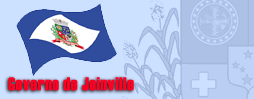
<style>
.page{position:relative;width:254px;height:99px;background:#cce0ff}
.page>*{position:absolute;margin:0}
.t1{font:18px "Haettenschweiler";letter-spacing:0.02em;color:#ff0022;font-weight:bold}
</style>
<div class="page">
<p class="t1" style="left:8px;top:77px;width:126px;height:14px">Governo de Joinville</p>
</div>
